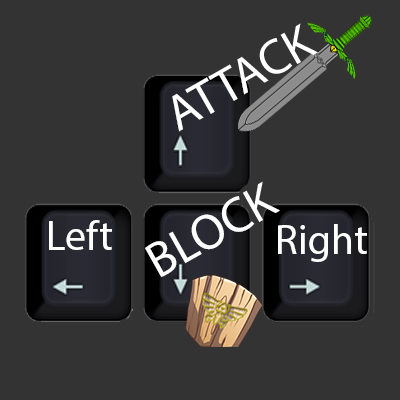
<style>
.page{position:relative;width:400px;height:400px;background:#333333}
.page>*{position:absolute;margin:0}
.t1{font:12px "MyriadPro-Regular";color:#ffffff}
.t2{font:41.7px "MyriadPro-Regular";color:#ffffff}
</style>
<div class="page">
<p class="t1" style="left:172px;top:23px;width:146px;height:109px;rotate:-30deg">ATTACK</p>
<p class="t1" style="left:145px;top:181px;width:135px;height:96px;rotate:-29deg">BLOCK</p>
<p class="t2" style="left:49px;top:220px;width:63px;height:30px">Left</p>
<p class="t2" style="left:278px;top:224px;width:89px;height:38px">Right</p>
</div>
